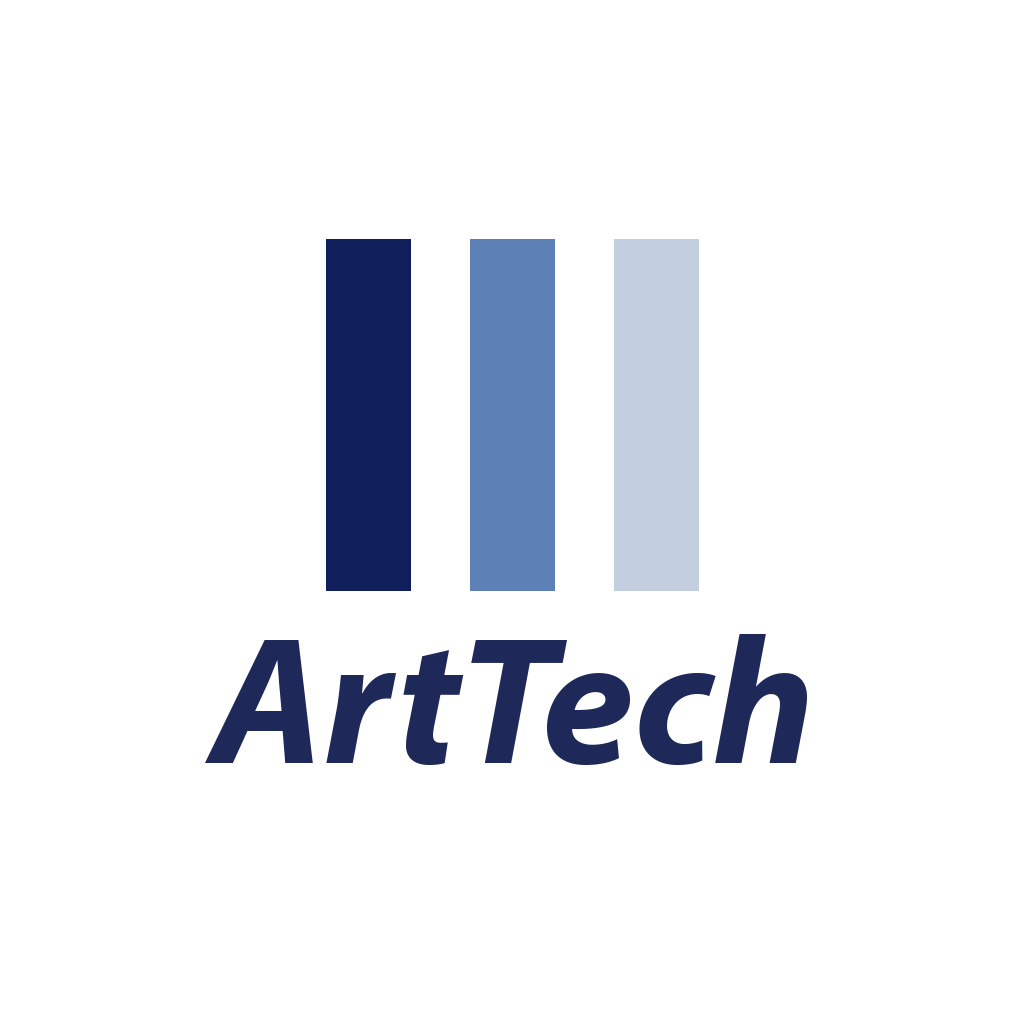
<style>
.page{position:relative;width:1024px;height:1024px;background:#ffffff}
.page>*{position:absolute;margin:0}
.t1{font:182px "MyriadPro-BoldIt";color:#1e2859}
</style>
<div class="page">
<p class="t1" style="left:205px;top:634px;width:602px;height:132px">ArtTech</p>
</div>
